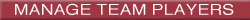
<style>
.page{position:relative;width:250px;height:20px}
.page>*{position:absolute;margin:0}
.t1{font:15px "Helvetica";color:#ffffff;scale:1.2 1}
</style>
<div class="page">
<p class="t1" style="left:15px;top:3px;width:219px;height:12px">MANAGE TEAM PLAYERS</p>
</div>
